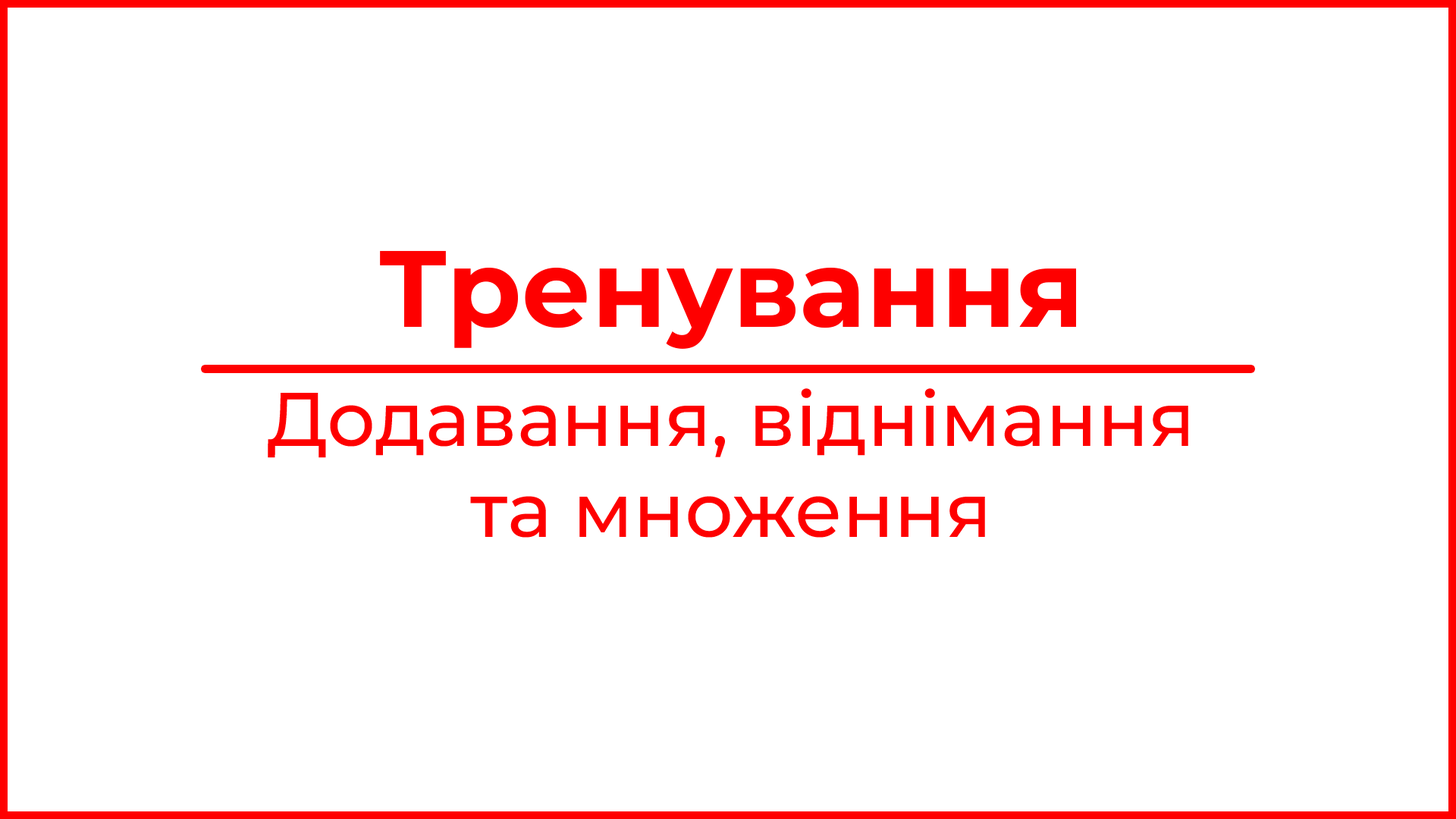
<style>
.page{position:relative;width:1456px;height:819px;background:#ffffff}
.page>*{position:absolute;margin:0}
.t1{font:108.3px "Montserrat-Bold";color:#fe0000}
.t2{font:75.8px "Montserrat-Medium";color:#fe0000}
</style>
<div class="page">
<p class="t1" style="left:380px;top:250px;width:696px;height:99px">Тренування</p>
<p class="t2" style="left:268px;top:388px;width:920px;height:150px;text-align:center">Додавання, віднімання<br>та множення</p>
</div>
